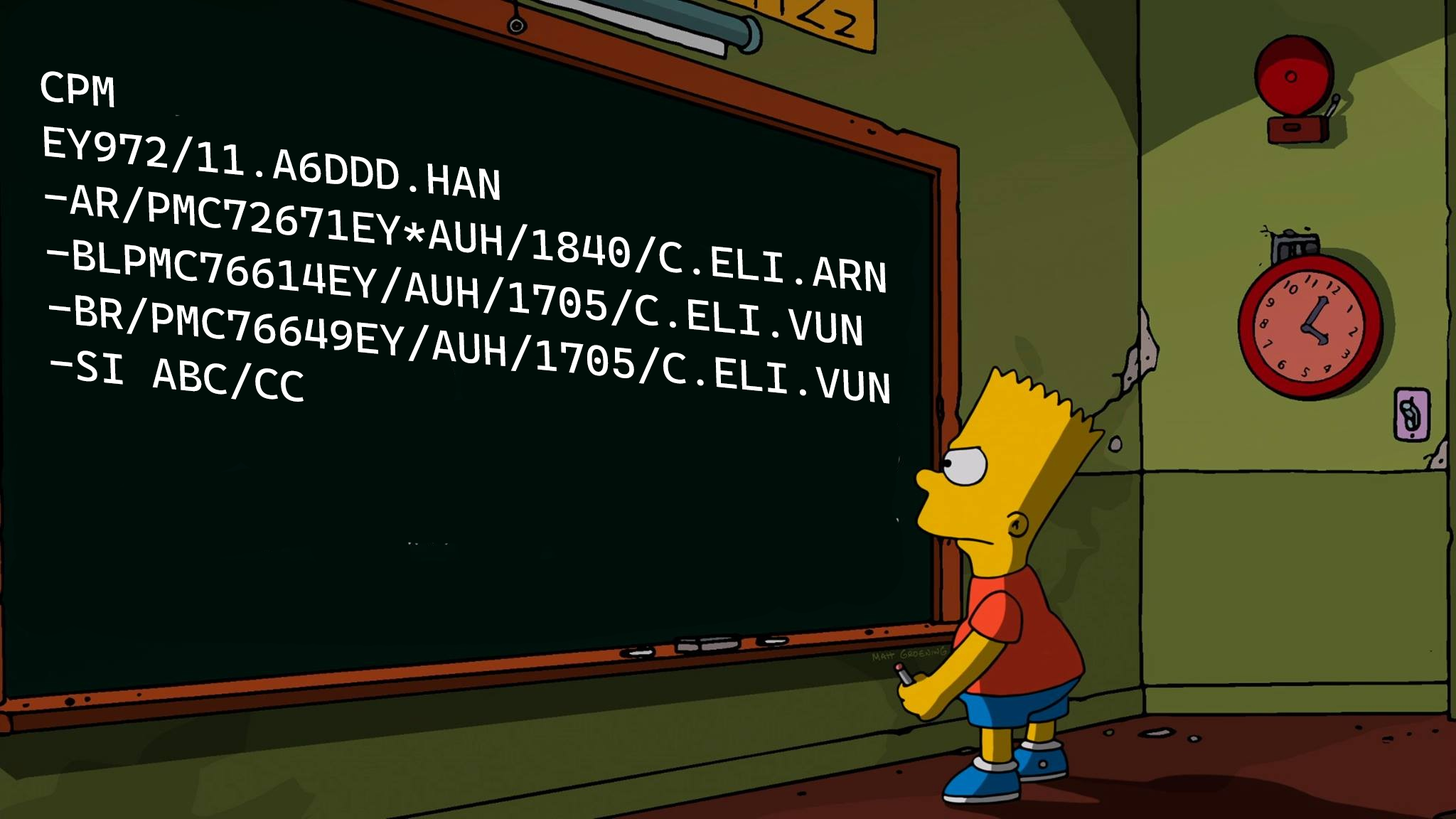
<style>
.page{position:relative;width:1456px;height:819px;background:#000e09}
.page>*{position:absolute;margin:0}
.t1{font:42.7px/55.5px "CascadiaCode-Regular";color:#ffffff}
</style>
<div class="page">
<p class="t1" style="left:41px;top:71px;width:848px;height:333px;rotate:6deg">CPM<br>EY972/11.A6DDD.HAN<br>-AR/PMC72671EY*AUH/1840/C.ELI.ARN<br>-BLPMC76614EY/AUH/1705/C.ELI.VUN<br>-BR/PMC76649EY/AUH/1705/C.ELI.VUN<br>-SI ABC/CC</p>
</div>
